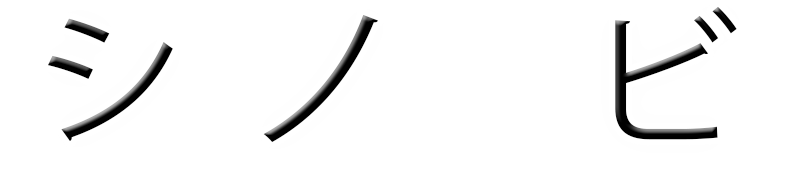
<style>
.page{position:relative;width:800px;height:177px;background:#ffffff}
.page>*{position:absolute;margin:0}
.t1{font:150px "KozGoPr6N-Regular";color:#010101}
.t2{font:150px "KozGoPr6N-Regular"}
</style>
<div class="page">
<p class="t1" style="left:615px;top:6px;width:122px;height:134px">ビ</p>
<p class="t2" style="left:263px;top:14px;width:116px;height:129px">ノ</p>
<p class="t2" style="left:48px;top:18px;width:125px;height:124px">シ</p>
</div>
